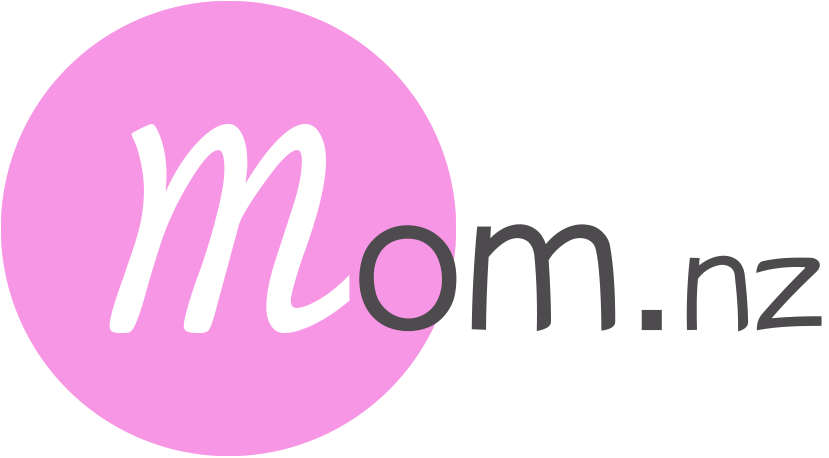
<style>
.page{position:relative;width:829px;height:458px;background:#ffffff}
.page>*{position:absolute;margin:0}
.t1{font:311px "JCfg";color:#ffffff}
.t2{font:200px "YuppyTC-Regular";color:#4d4b4d}
.t3{font:140px "YuppyTC-Regular";color:#4d4b4d}
</style>
<div class="page">
<p class="t1" style="left:109px;top:124px;width:241px;height:209px">M</p>
<p class="t2" style="left:359px;top:224px;width:463px;height:108px">om.<span class="t3">nz</span></p>
</div>
